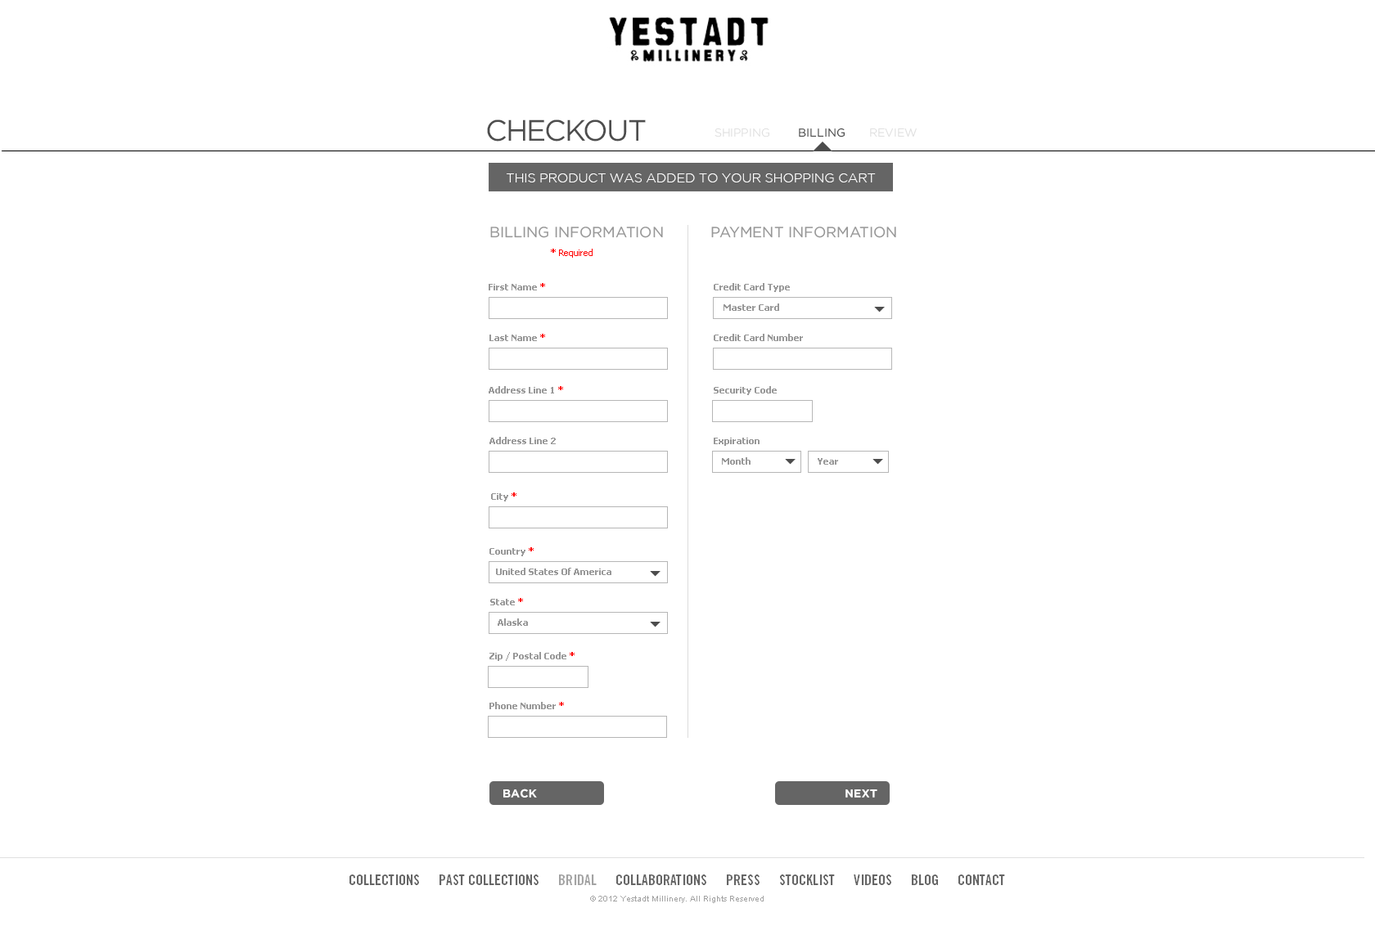
<style>
.page{position:relative;width:1375px;height:944px;background:#ffffff}
.page>*{position:absolute;margin:0}
.t1{font:29.5px "Gotham-Book";letter-spacing:-0.05em;color:#4d4d4d;text-transform:uppercase}
.t2{font:11.5px "Gotham-Book";color:#e0e0e0;text-transform:uppercase}
.t3{font:11.5px "Gotham-Book";color:#4d4d4d;text-transform:uppercase}
.t4{font:13.3px "GothamLight";letter-spacing:-0.025em;color:#ffffff;text-transform:uppercase}
.t5{font:14.7px "Gotham-Book";color:#989898;text-transform:uppercase}
.t6{font:9px "Tahoma";color:#ff0000}
.t7{font:9px "Tahoma-Bold";color:#ff0000}
.t8{font:9px "Tahoma-Bold";color:#989898}
.t9{font:11.5px "GothamBold";color:#ffffff;text-transform:uppercase}
</style>
<div class="page">
<p class="t1" style="left:487px;top:119px;width:159px;height:23px">Checkout</p>
<p class="t2" style="left:714px;top:128px;width:55px;height:9px">shipping</p>
<p class="t3" style="left:799px;top:128px;width:45px;height:9px">billing</p>
<p class="t2" style="left:870px;top:128px;width:46px;height:9px">review</p>
<p class="t4" style="left:506px;top:173px;width:369px;height:9px">This product was added to your shopping cart</p>
<p class="t5" style="left:490px;top:227px;width:173px;height:11px">billing information</p>
<p class="t5" style="left:711px;top:227px;width:185px;height:11px">payment information</p>
<p class="t6" style="left:551px;top:249px;width:41px;height:9px"><span class="t7">*</span> Required</p>
<p class="t8" style="left:488px;top:283px;width:57px;height:7px">First Name <span class="t7">*</span></p>
<p class="t8" style="left:713px;top:283px;width:77px;height:9px">Credit Card Type</p>
<p class="t8" style="left:723px;top:304px;width:56px;height:7px">Master Card</p>
<p class="t8" style="left:489px;top:334px;width:56px;height:7px">Last Name <span class="t7">*</span></p>
<p class="t8" style="left:713px;top:334px;width:90px;height:7px">Credit Card Number</p>
<p class="t8" style="left:488px;top:386px;width:75px;height:8px">Address Line 1 <span class="t7">*</span></p>
<p class="t8" style="left:713px;top:386px;width:63px;height:9px">Security Code</p>
<p class="t8" style="left:489px;top:437px;width:67px;height:7px">Address Line 2</p>
<p class="t8" style="left:713px;top:438px;width:46px;height:8px">Expiration</p>
<p class="t8" style="left:722px;top:457px;width:28px;height:8px">Month</p>
<p class="t8" style="left:817px;top:458px;width:21px;height:7px">Year</p>
<p class="t8" style="left:491px;top:493px;width:25px;height:9px">City <span class="t7">*</span></p>
<p class="t8" style="left:489px;top:547px;width:44px;height:9px">Country <span class="t7">*</span></p>
<p class="t8" style="left:496px;top:568px;width:115px;height:7px">United States Of America</p>
<p class="t8" style="left:490px;top:598px;width:33px;height:7px">State <span class="t7">*</span></p>
<p class="t8" style="left:497px;top:619px;width:31px;height:7px">Alaska</p>
<p class="t8" style="left:489px;top:652px;width:85px;height:9px">Zip / Postal Code <span class="t7">*</span></p>
<p class="t8" style="left:489px;top:702px;width:75px;height:7px">Phone Number <span class="t7">*</span></p>
<p class="t9" style="left:503px;top:789px;width:34px;height:9px">back</p>
<p class="t9" style="left:845px;top:790px;width:32px;height:8px">next</p>
</div>
